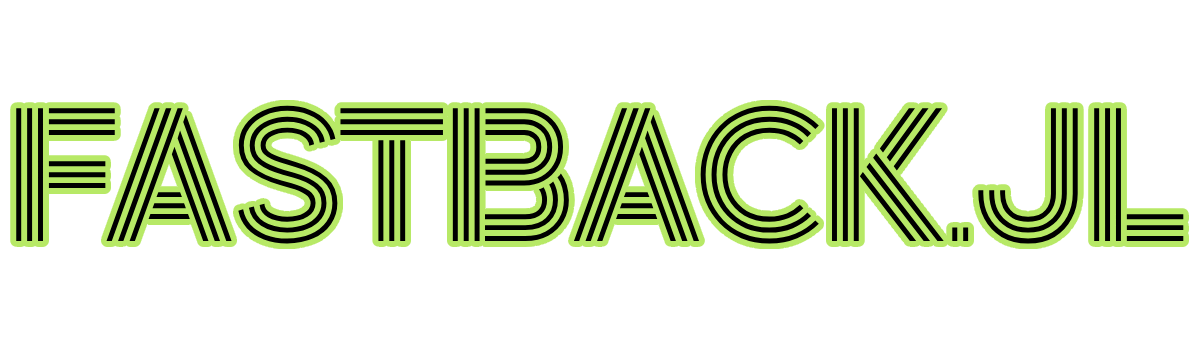
<style>
.page{position:relative;width:1200px;height:350px;background:#ffffff}
.page>*{position:absolute;margin:0}
.t1{font:165px "ZenTokyoZoo-Regular";color:#000000;text-transform:uppercase}
</style>
<div class="page">
<p class="t1" style="left:16px;top:105px;width:1168px;height:139px">Fastback.jl</p>
</div>
